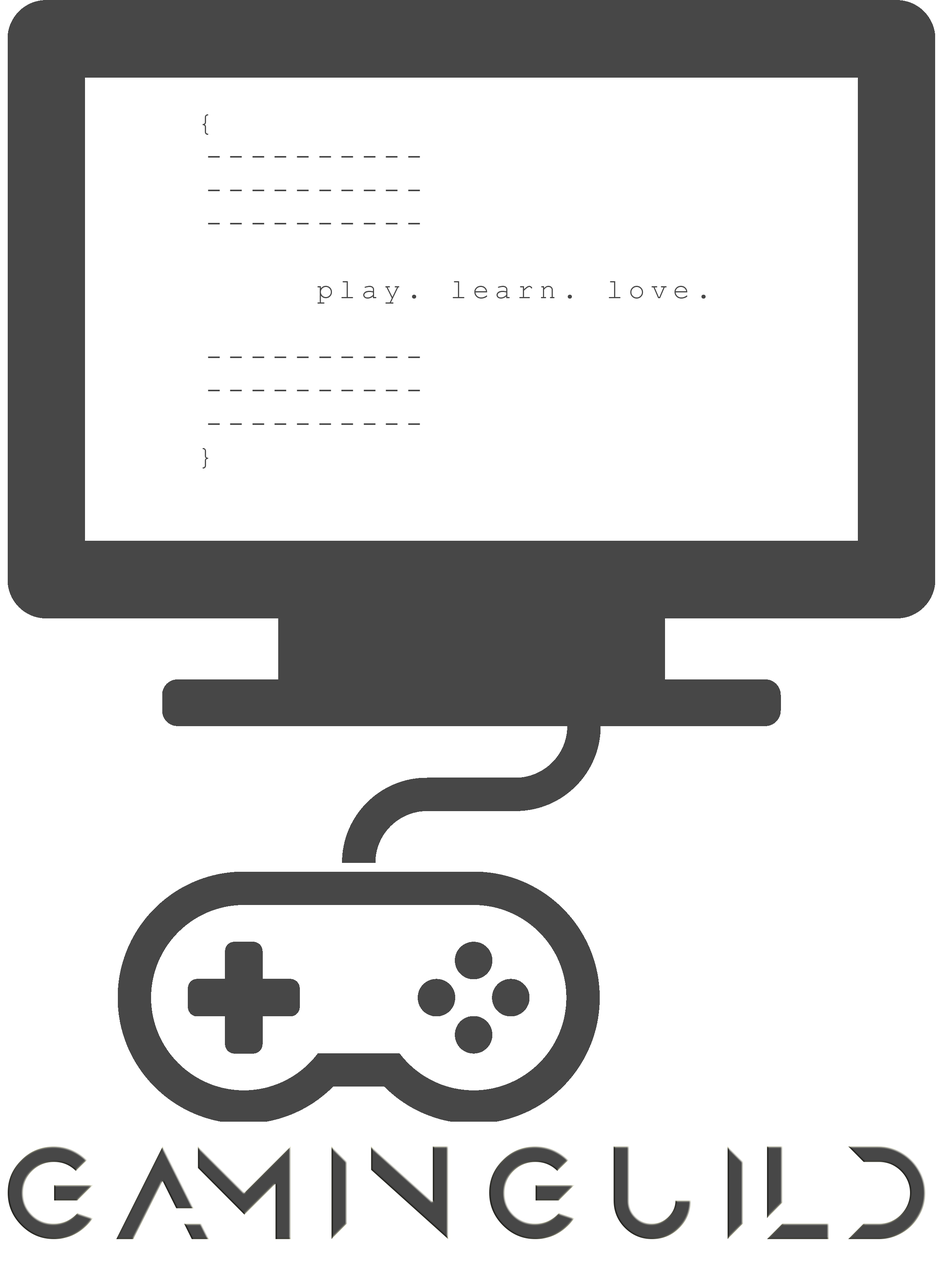
<style>
.page{position:relative;width:939px;height:1270px;background:#ffffff}
.page>*{position:absolute;margin:0}
.t1{font:27.8px "CourierNewPSMT";letter-spacing:0.2em;color:#474747}
.t2{font:115.9px "Anurati-Regular";letter-spacing:0.2em;color:#474747}
</style>
<div class="page">
<p class="t1" style="left:202px;top:114px;width:503px;height:355px;text-align:center">{<br>----------<br>----------<br>----------<br><br>        play. learn. love.<br><br>----------<br>----------<br>----------<br>}</p>
<p class="t2" style="left:8px;top:1146px;width:917px;height:94px">GAMINGUILD</p>
</div>
